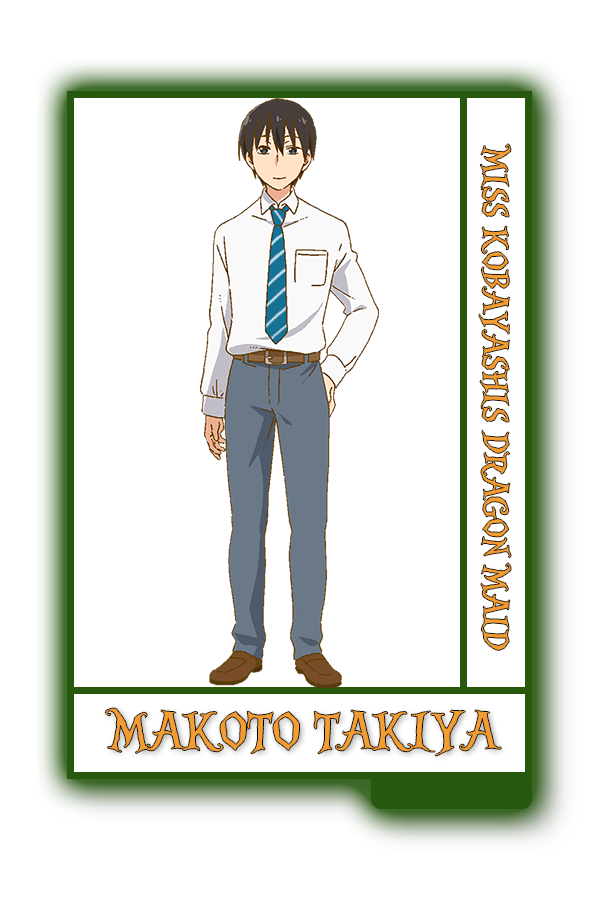
<style>
.page{position:relative;width:600px;height:900px;background:#ffffff}
.page>*{position:absolute;margin:0}
.t1{font:37.3px "AliceinWonderland";color:#f29d33}
.t2{font:56px "AliceinWonderland";color:#f29d33}
</style>
<div class="page">
<p class="t1" style="left:479px;top:144px;width:32px;height:506px;rotate:90deg">MISS KOBAYASHIS DRAGON MAID</p>
<p class="t2" style="left:105px;top:708px;width:396px;height:48px">MAKOTO TAKIYA</p>
</div>
